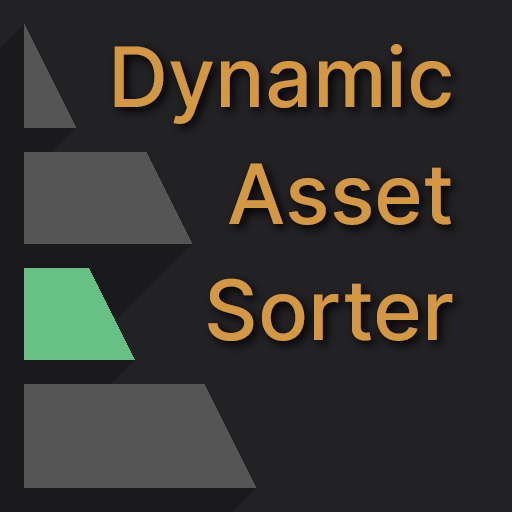
<style>
.page{position:relative;width:512px;height:512px;background:#222225}
.page>*{position:absolute;margin:0}
.t1{font:83.3px/116.7px "Inter-Medium";color:#d59842}
</style>
<div class="page">
<p class="t1" style="left:114px;top:44px;width:339px;height:297px;text-align:right">Dynamic<br>Asset<br>Sorter</p>
</div>
